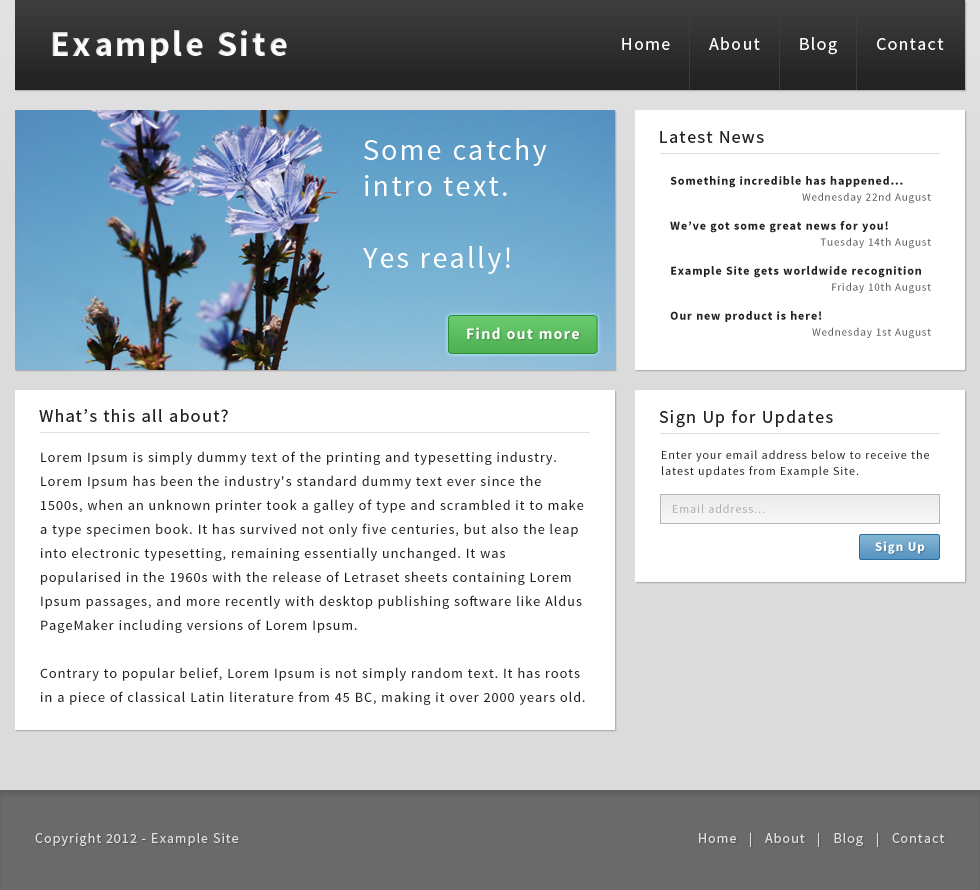
<style>
.page{position:relative;width:980px;height:890px;background:#ffffff}
.page>*{position:absolute;margin:0}
.t1{font:36px "SourceSansPro-Bold";letter-spacing:0.075em;color:#ffffff}
.t2{font:18px "SourceSansPro-Regular";letter-spacing:0.075em;color:#ffffff}
.t3{font:18px "SourceSansPro-Regular";letter-spacing:0.075em;color:#222222}
.t4{font:30px "SourceSansPro-Regular";letter-spacing:0.075em;color:#ffffff}
.t5{font:12px/16px "SourceSansPro-Bold";letter-spacing:0.075em;color:#222222}
.t6{font:11px/16px "SourceSansPro-Regular";letter-spacing:0.075em;color:#5c5c5c}
.t7{font:16px "SourceSansPro-Bold";letter-spacing:0.075em;color:#ffffff}
.t8{font:14px/24px "SourceSansPro-Regular";letter-spacing:0.075em;color:#222222}
.t9{font:12px/16px "SourceSansPro-Regular";letter-spacing:0.075em;color:#222222}
.t10{font:12px "SourceSansPro-Regular";letter-spacing:0.075em;color:#acacac}
.t11{font:13px "SourceSansPro-Bold";letter-spacing:0.075em;color:#ffffff}
.t12{font:14px "SourceSansPro-Regular";letter-spacing:0.075em;color:#dfdfdf}
</style>
<div class="page">
<p class="t1" style="left:52px;top:30px;width:235px;height:33px">Example Site</p>
<p class="t2" style="left:622px;top:38px;width:48px;height:12px">Home</p>
<p class="t2" style="left:709px;top:37px;width:51px;height:13px">About</p>
<p class="t2" style="left:800px;top:37px;width:37px;height:18px">Blog</p>
<p class="t2" style="left:877px;top:38px;width:67px;height:12px">Contact</p>
<p class="t3" style="left:660px;top:131px;width:104px;height:12px">Latest News</p>
<p class="t4" style="left:363px;top:138px;width:184px;height:136px">Some catchy intro text. <br><br>Yes really!</p>
<p class="t5" style="left:670px;top:176px;width:261px;height:28px">Something incredible has happened...<br><span class="t6">Wednesday 22nd August</span></p>
<p class="t5" style="left:670px;top:221px;width:261px;height:28px">We’ve got some great news for you!<br><span class="t6">Tuesday 14th August</span></p>
<p class="t5" style="left:671px;top:266px;width:260px;height:28px">Example Site gets worldwide recognition<br><span class="t6">Friday 10th August</span></p>
<p class="t5" style="left:670px;top:311px;width:261px;height:28px">Our new product is here!<br><span class="t6">Wednesday 1st August</span></p>
<p class="t7" style="left:467px;top:327px;width:112px;height:13px">Find out more</p>
<p class="t3" style="left:39px;top:409px;width:189px;height:13px">What’s this all about?</p>
<p class="t3" style="left:659px;top:410px;width:174px;height:18px">Sign Up for Updates</p>
<p class="t8" style="left:40px;top:451px;width:545px;height:254px">Lorem Ipsum is simply dummy text of the printing and typesetting industry. Lorem Ipsum has been the industry's standard dummy text ever since the 1500s, when an unknown printer took a galley of type and scrambled it to make a type specimen book. It has survived not only five centuries, but also the leap into electronic typesetting, remaining essentially unchanged. It was popularised in the 1960s with the release of Letraset sheets containing Lorem Ipsum passages, and more recently with desktop publishing software like Aldus PageMaker including versions of Lorem Ipsum.<br><br>Contrary to popular belief, Lorem Ipsum is not simply random text. It has roots in a piece of classical Latin literature from 45 BC, making it over 2000 years old.</p>
<p class="t9" style="left:662px;top:450px;width:267px;height:28px">Enter your email address below to receive the latest updates from Example Site.</p>
<p class="t10" style="left:673px;top:504px;width:92px;height:9px">Email address...</p>
<p class="t11" style="left:875px;top:541px;width:50px;height:13px">Sign Up</p>
<p class="t12" style="left:35px;top:833px;width:204px;height:13px">Copyright 2012 - Example Site</p>
<p class="t12" style="left:699px;top:832px;width:245px;height:15px">Home   |   About   |   Blog   |   Contact</p>
</div>
